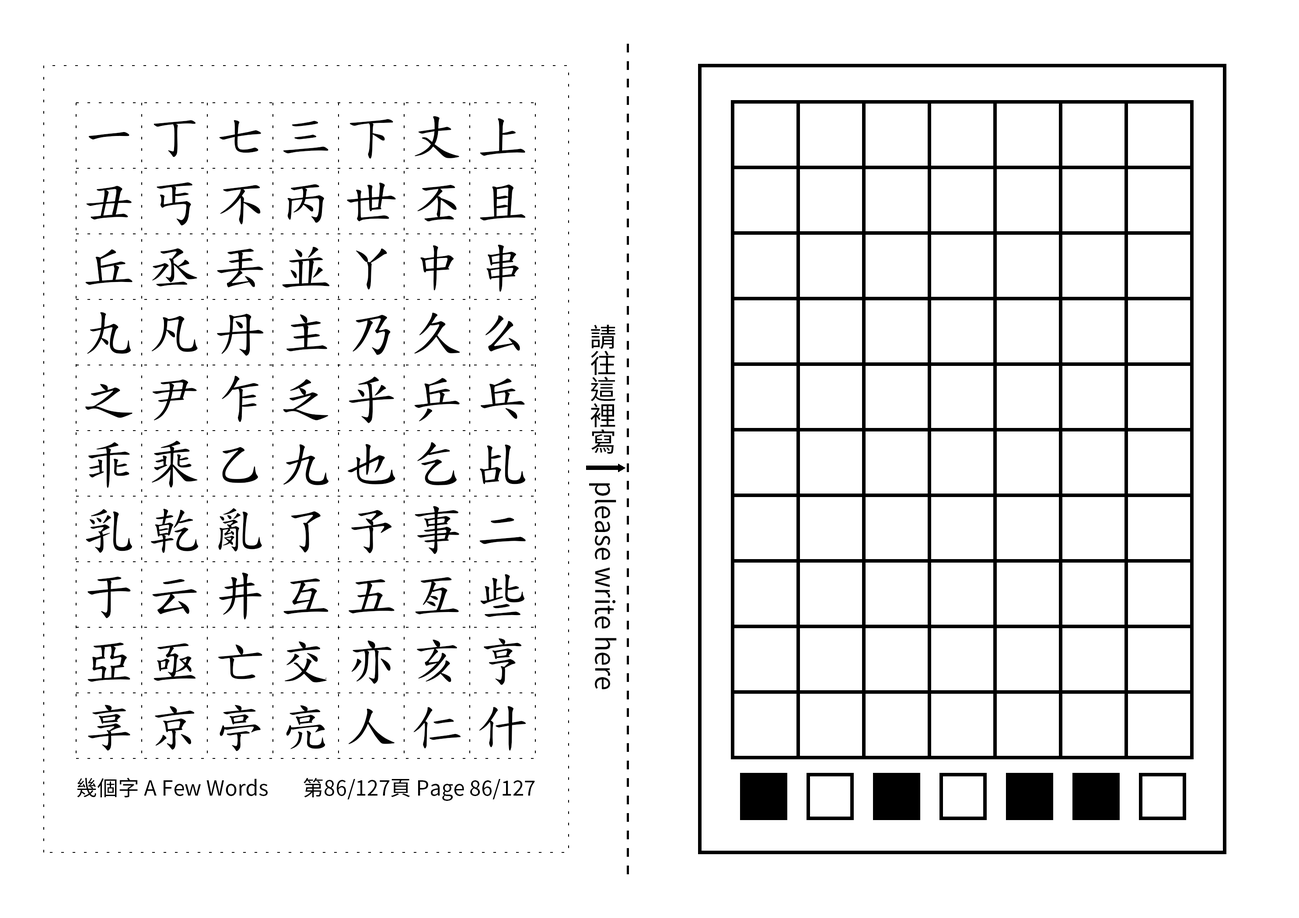
<style>
.page{position:relative;width:1299px;height:918px;background:#ffffff}
.page>*{position:absolute;margin:0}
.t1{font:52.5px/65.6px "TW-Kai-98_1";letter-spacing:0.25em;color:#000000}
.t2{font:26.2px "SourceHanSansTC-Regular";color:#000000}
.t3{font:21px "SourceHanSansTC-Regular";color:#000000}
</style>
<div class="page">
<p class="t1" style="left:85px;top:116px;width:441px;height:636px;text-align:center">一丁七三下丈上丑丐不丙世丕且丘丞丟並丫中串丸凡丹主乃久么之尹乍乏乎乒乓乖乘乙九也乞乩乳乾亂了予事二于云井互五亙些亞亟亡交亦亥亨享京亭亮人仁什</p>
<p class="t2" style="left:589px;top:324px;width:28px;height:366px;text-align:center">請往這裡寫　please write here</p>
<p class="t3" style="left:77px;top:778px;width:191px;height:20px">幾個字 A Few Words</p>
<p class="t3" style="left:303px;top:778px;width:232px;height:23px">第86/127頁 Page 86/127</p>
</div>
